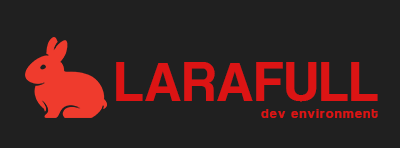
<style>
.page{position:relative;width:400px;height:148px;background:#202020}
.page>*{position:absolute;margin:0}
.t1{font:14.1px "CoolveticaRg-Regular";letter-spacing:0.09em;color:#dc1414}
.t2{font:57.9px "CoolveticaRg-Regular";letter-spacing:0.04em;color:#dc1414;text-transform:uppercase;scale:0.96 1}
</style>
<div class="page">
<p class="t1" style="left:116px;top:62px;width:262px;height:56px;text-align:right"><span class="t2">larafull<br></span>dev environment</p>
</div>
